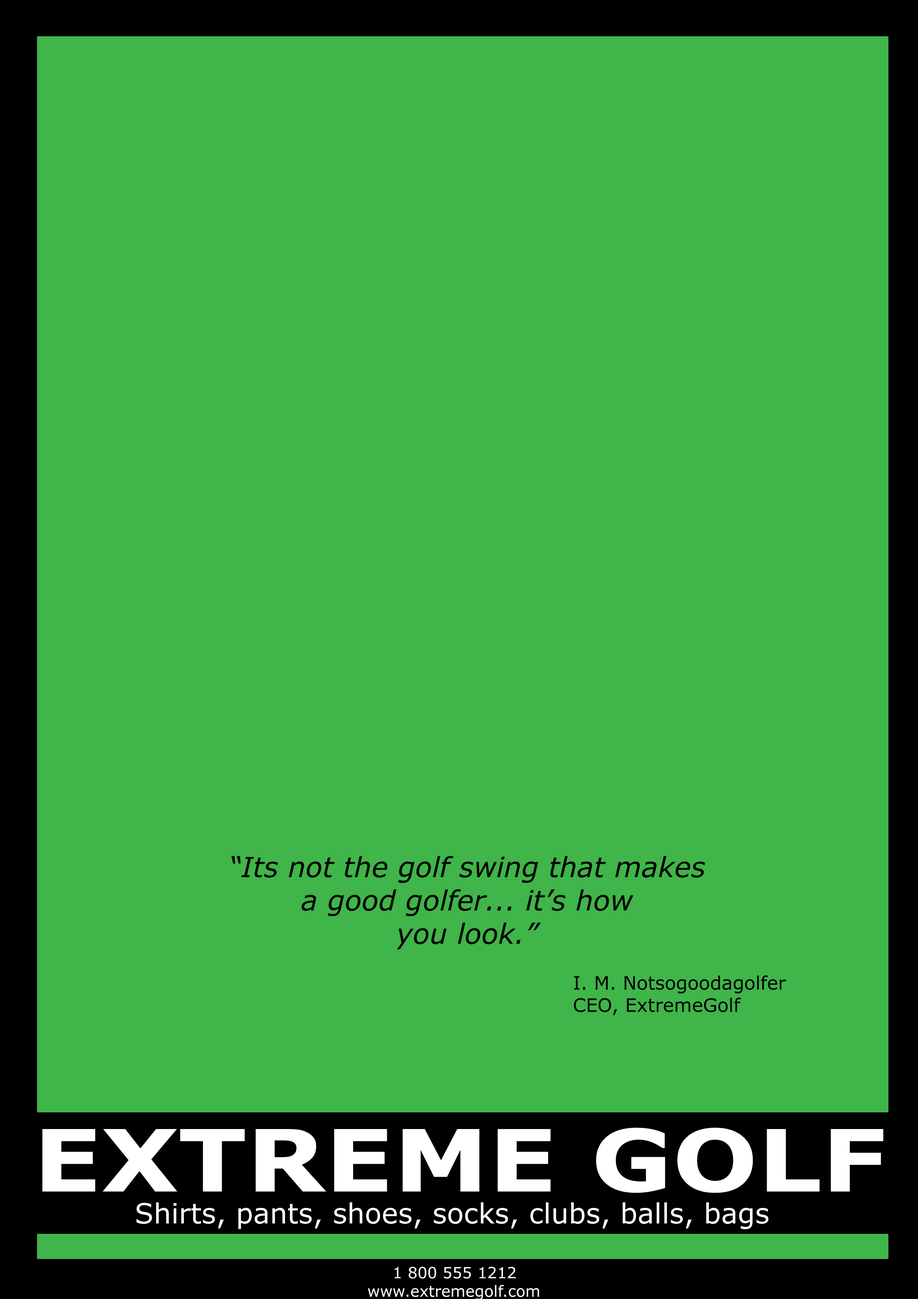
<style>
.page{position:relative;width:918px;height:1299px;background:#40b549}
.page>*{position:absolute;margin:0}
.t1{font:27.8px "Verdana-Italic";color:#000000}
.t2{font:18.5px "Verdana";color:#000000}
.t3{font:86px "Verdana-Bold";color:#ffffff;scale:1.17 1}
.t4{font:27.8px "Verdana";color:#ffffff}
</style>
<div class="page">
<p class="t1" style="left:231px;top:856px;width:474px;height:93px;text-align:center">“Its not the golf swing that makes<br>a good golfer... it’s how<br>you look.”</p>
<p class="t2" style="left:574px;top:975px;width:212px;height:40px">I. M. Notsogoodagolfer<br>CEO, ExtremeGolf</p>
<p class="t3" style="left:42px;top:1127px;width:842px;height:66px">EXTREME GOLF</p>
<p class="t4" style="left:136px;top:1202px;width:633px;height:27px">Shirts, pants, shoes, socks, clubs, balls, bags</p>
</div>
